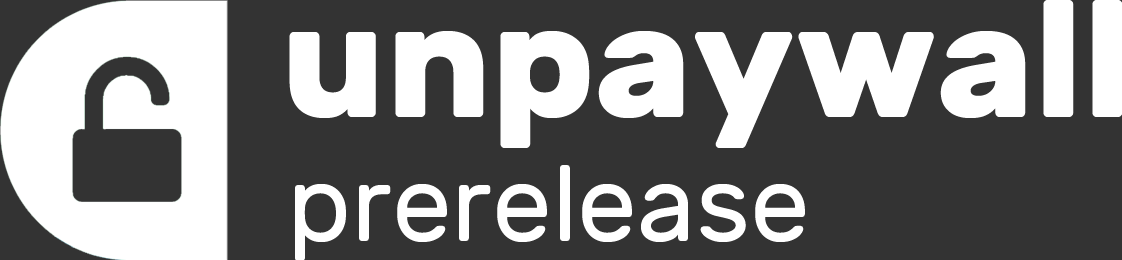
<style>
.page{position:relative;width:1122px;height:260px;background:#333333}
.page>*{position:absolute;margin:0}
.t1{font:164.3px "Rubik-Bold";color:#ffffff}
.t2{font:107.2px "Rubik-Regular";color:#ffffff}
</style>
<div class="page">
<p class="t1" style="left:289px;top:0px;width:833px;height:148px">unpaywall</p>
<p class="t2" style="left:295px;top:165px;width:510px;height:95px">prerelease</p>
</div>
